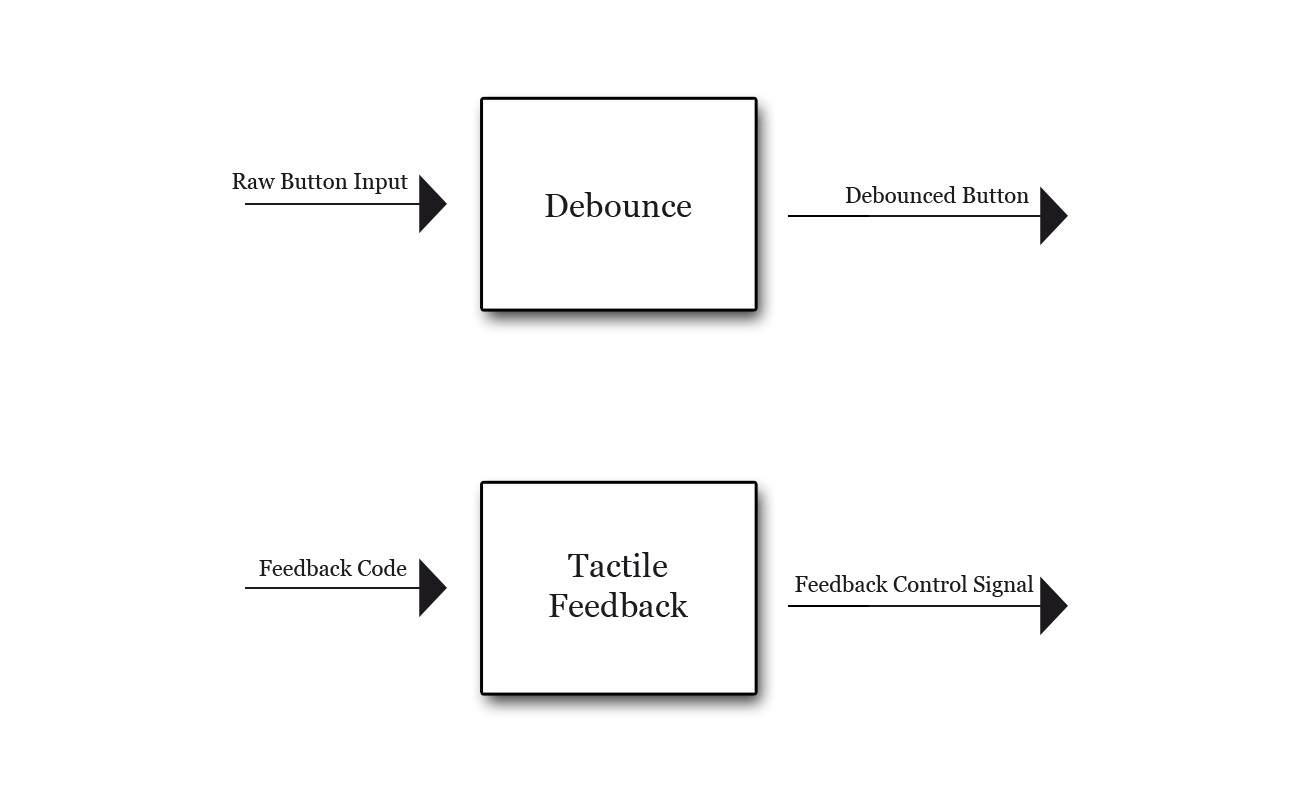
<style>
.page{position:relative;width:1300px;height:792px;background:#ffffff}
.page>*{position:absolute;margin:0}
.t1{font:22.2px "Georgia";color:#1c1a1e}
.t2{font:33.3px "Georgia";color:#1c1a1e}
</style>
<div class="page">
<p class="t1" style="left:232px;top:173px;width:176px;height:21px">Raw Button Input</p>
<p class="t2" style="left:545px;top:192px;width:147px;height:25px">Debounce</p>
<p class="t1" style="left:845px;top:186px;width:184px;height:17px">Debounced Button</p>
<p class="t2" style="left:549px;top:552px;width:139px;height:65px;text-align:center">Tactile<br>Feedback</p>
<p class="t1" style="left:259px;top:559px;width:148px;height:17px">Feedback Code</p>
<p class="t1" style="left:795px;top:575px;width:239px;height:22px">Feedback Control Signal</p>
</div>
